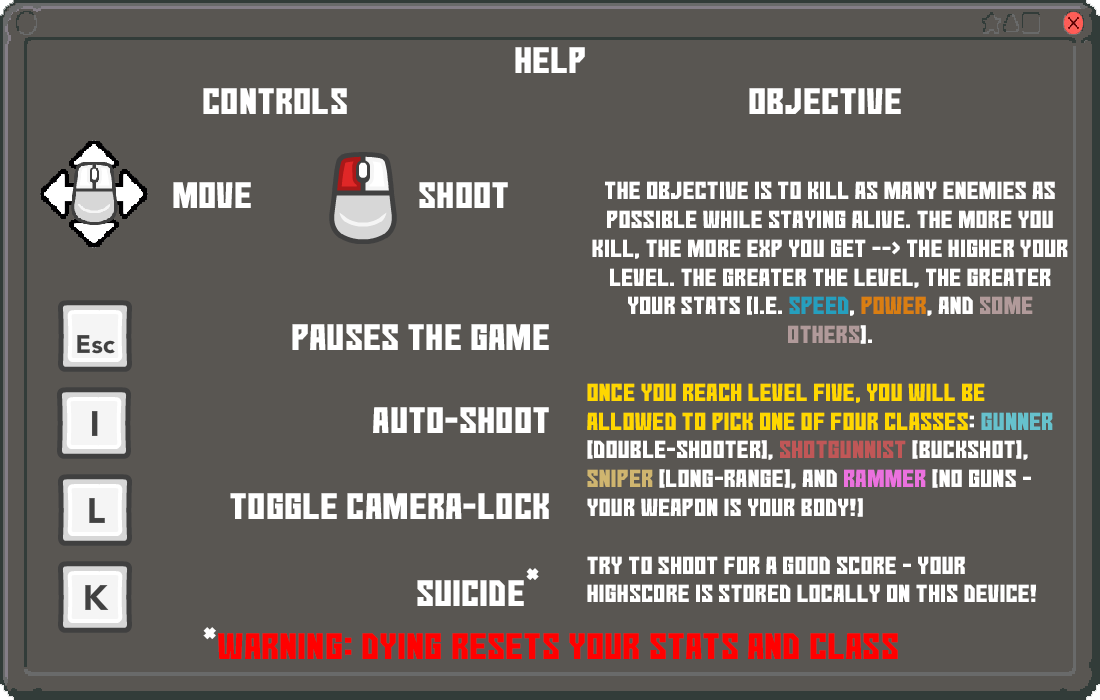
<style>
.page{position:relative;width:1100px;height:700px;background:#595652}
.page>*{position:absolute;margin:0}
.t1{font:36px "No-Continue";color:#ffffff}
.t2{font:24px "No-Continue";color:#ffffff}
.t3{font:24px "No-Continue";color:#259fbe}
.t4{font:24px "No-Continue";color:#d97e12}
.t5{font:24px "No-Continue";color:#b19a9a}
.t6{font:24px "No-Continue";color:#ffd700}
.t7{font:24px "No-Continue";color:#66c1cc}
.t8{font:24px "No-Continue";color:#c05757}
.t9{font:24px "No-Continue";color:#cfb56f}
.t10{font:24px "No-Continue";color:#eb71de}
.t11{font:36px "No-Continue";color:#fffefe}
.t12{font:36px "No-Continue";color:#ff0000}
</style>
<div class="page">
<p class="t1" style="left:515px;top:47px;width:70px;height:26px">help</p>
<p class="t1" style="left:203px;top:88px;width:144px;height:26px">controls</p>
<p class="t1" style="left:749px;top:88px;width:152px;height:26px">objective</p>
<p class="t1" style="left:173px;top:182px;width:335px;height:26px">move                     shoot</p>
<p class="t2" style="left:587px;top:181px;width:481px;height:421px;text-align:center">The objective is to kill as many enemies as possible while staying alive. The more you kill, the more exp you get --&gt; the higher your level. the greater the level, the greater your stats (i.e. <span class="t3">speed</span>, <span class="t4">power</span>, and <span class="t5">some others</span>). <br><br><span class="t6">once you reach level five, you will be allowed to pick one of four classes</span>: <span class="t7">gunner</span> (double-shooter), <span class="t8">shotgunnist</span> (buckshot), <span class="t9">Sniper </span>(long-range], and <span class="t10">rammer</span> (no guns - your weapon is your body!)<br><br>try to shoot for a good score - your highscore is stored locally on this device!</p>
<p class="t1" style="left:292px;top:324px;width:257px;height:26px">pauses the game</p>
<p class="t1" style="left:230px;top:407px;width:319px;height:199px;text-align:right">auto-shoot<br><br>toggle camera-lock<br><br>                           suicide</p>
<p class="t1" style="left:526px;top:568px;width:13px;height:12px">*</p>
<p class="t11" style="left:203px;top:627px;width:13px;height:13px">*</p>
<p class="t12" style="left:218px;top:633px;width:680px;height:26px">Warning: dying resets your stats and class</p>
</div>
